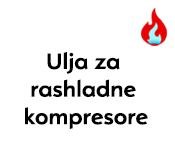
<style>
.page{position:relative;width:175px;height:150px;background:#ffffff}
.page>*{position:absolute;margin:0}
.t1{font:23px "OpelSans-Bold";color:#000000}
</style>
<div class="page">
<p class="t1" style="left:25px;top:52px;width:123px;height:77px;text-align:center">Ulja za <br>rashladne <br>kompresore</p>
</div>
